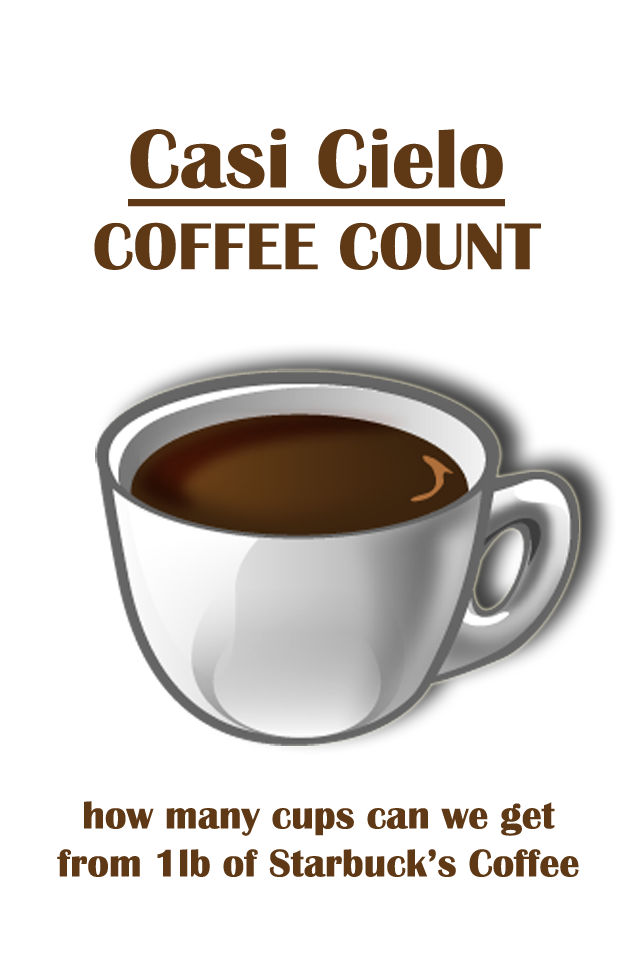
<style>
.page{position:relative;width:640px;height:960px;background:#ffffff}
.page>*{position:absolute;margin:0}
.t1{font:68px "BritannicBold";color:#5f3915}
.t2{font:86px "BritannicBold";color:#5f3915;text-decoration:underline}
.t3{font:40px "BritannicBold";color:#5f3915}
</style>
<div class="page">
<p class="t1" style="left:94px;top:128px;width:447px;height:142px;text-align:center"><span class="t2">Casi Cielo<br></span>COFFEE COUNT</p>
<p class="t3" style="left:57px;top:801px;width:522px;height:76px;text-align:center">how many cups can we get<br>from 1lb of Starbuck’s Coffee</p>
</div>
